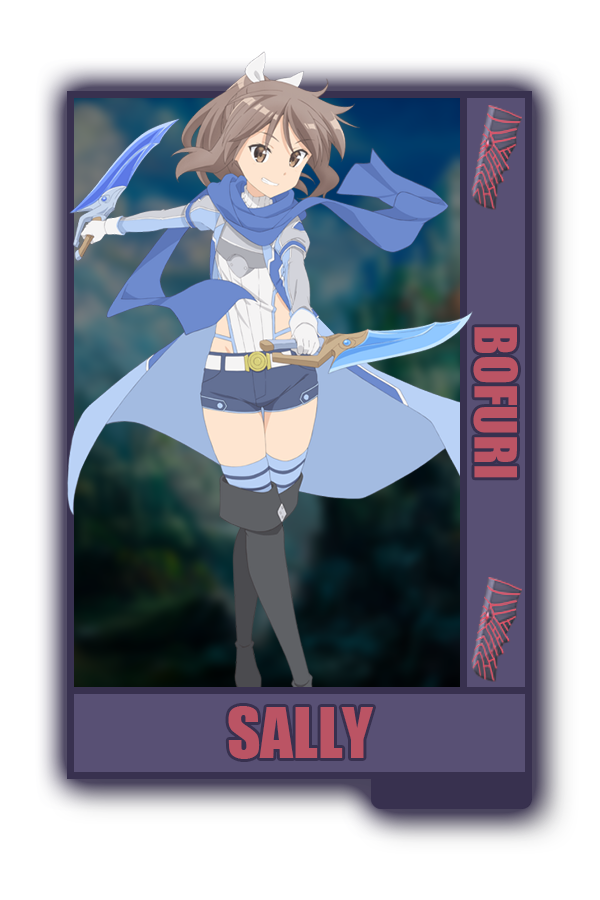
<style>
.page{position:relative;width:600px;height:900px;background:#ffffff}
.page>*{position:absolute;margin:0}
.t1{font:53.6px "Impact";color:#bb5464}
.t2{font:64.6px "Impact";color:#bb5464}
</style>
<div class="page">
<p class="t1" style="left:473px;top:327px;width:45px;height:151px;rotate:90deg">BOFURI</p>
<p class="t2" style="left:228px;top:706px;width:145px;height:53px">SALLY</p>
</div>
